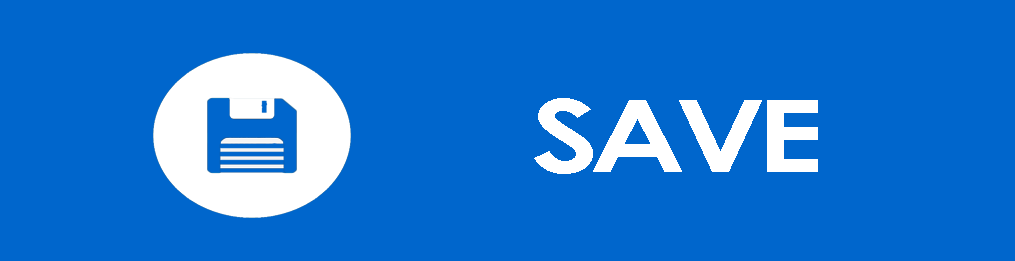
<style>
.page{position:relative;width:1015px;height:261px;background:#0066cc}
.page>*{position:absolute;margin:0}
.t1{font:100.3px "CenturyGothic-Bold";letter-spacing:-0.08em;color:#ffffff;scale:1.3 1}
</style>
<div class="page">
<p class="t1" style="left:534px;top:98px;width:284px;height:76px">SAVE</p>
</div>
